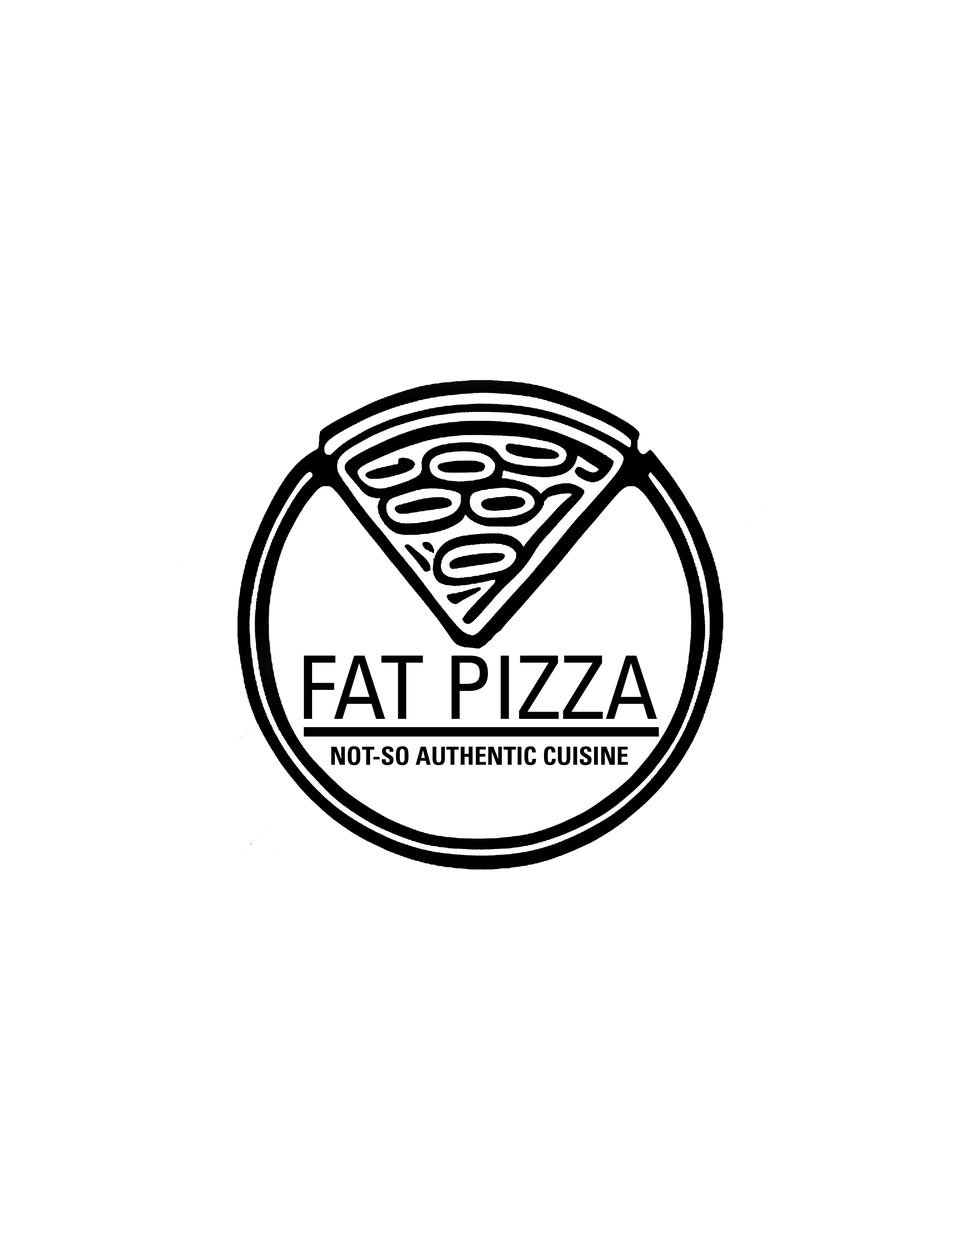
<style>
.page{position:relative;width:960px;height:1242px;background:#ffffff}
.page>*{position:absolute;margin:0}
.t1{font:87.8px "UniversLTPro-Condensed";color:#000000}
.t2{font:25.1px "UniversLTPro-BoldCond";color:#000000}
</style>
<div class="page">
<p class="t1" style="left:304px;top:655px;width:353px;height:64px">FAT PIZZA</p>
<p class="t2" style="left:331px;top:746px;width:297px;height:19px">NOT-SO AUTHENTIC CUISINE</p>
</div>
